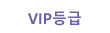
<style>
.page{position:relative;width:110px;height:33px;background:#ffffff}
.page>*{position:absolute;margin:0}
.t1{font:15px "MalgunGothicBold";color:#6861a3}
</style>
<div class="page">
<p class="t1" style="left:28px;top:11px;width:53px;height:15px">VIP등급</p>
</div>
